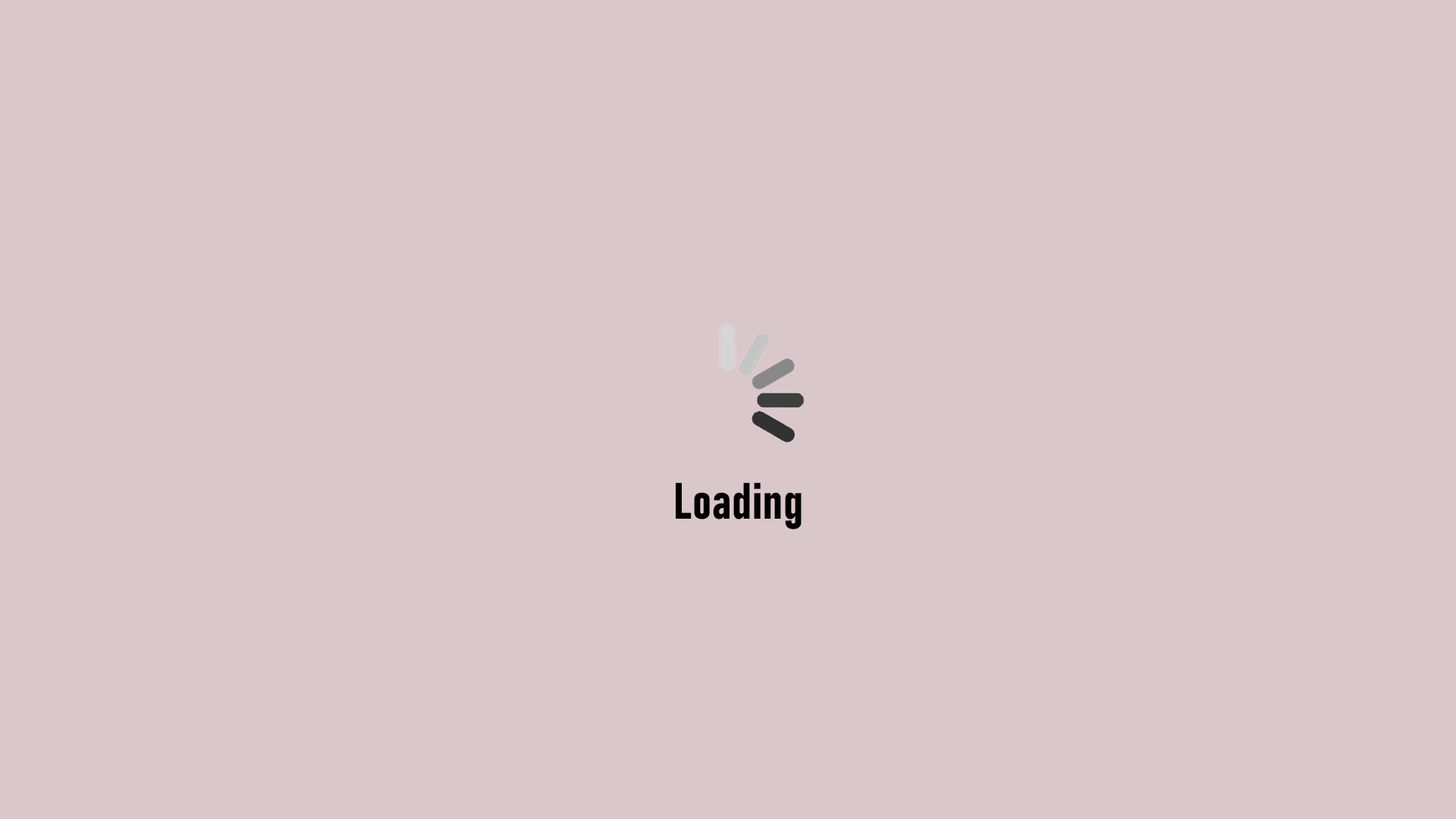
<style>
.page{position:relative;width:1456px;height:819px;background:#d9c7ca}
.page>*{position:absolute;margin:0}
.t1{font:50.6px "Bahnschrift-BoldCondensed";color:#000000}
</style>
<div class="page">
<p class="t1" style="left:676px;top:482px;width:126px;height:47px">Loading</p>
</div>
